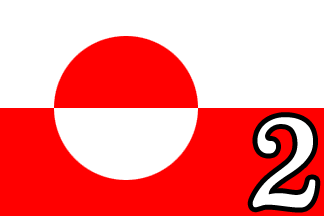
<style>
.page{position:relative;width:324px;height:216px;background:#ffffff}
.page>*{position:absolute;margin:0}
.t1{font:130px "PlantagenetCherokee";color:#ffffff;font-variant:small-caps;font-weight:bold}
</style>
<div class="page">
<p class="t1" style="left:252px;top:117px;width:64px;height:91px">2</p>
</div>
